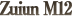
<style>
.page{position:relative;width:72px;height:18px;background:#ffffff}
.page>*{position:absolute;margin:0}
.t1{font:18px "RyuminPro-ExBold";letter-spacing:-0.09em;color:#4a3f32;font-weight:bold;scale:0.9 1}
</style>
<div class="page">
<p class="t1" style="left:0px;top:1px;width:73px;height:15px">Zuiun M12</p>
</div>
